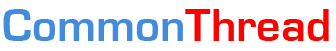
<style>
.page{position:relative;width:336px;height:51px;background:#ffffff}
.page>*{position:absolute;margin:0}
.t1{font:48px "EurostileBold";color:#428bdd}
.t2{font:48px "EurostileBold";color:#fe0000}
</style>
<div class="page">
<p class="t1" style="left:3px;top:9px;width:326px;height:32px">Common<span class="t2">Thread</span></p>
</div>
